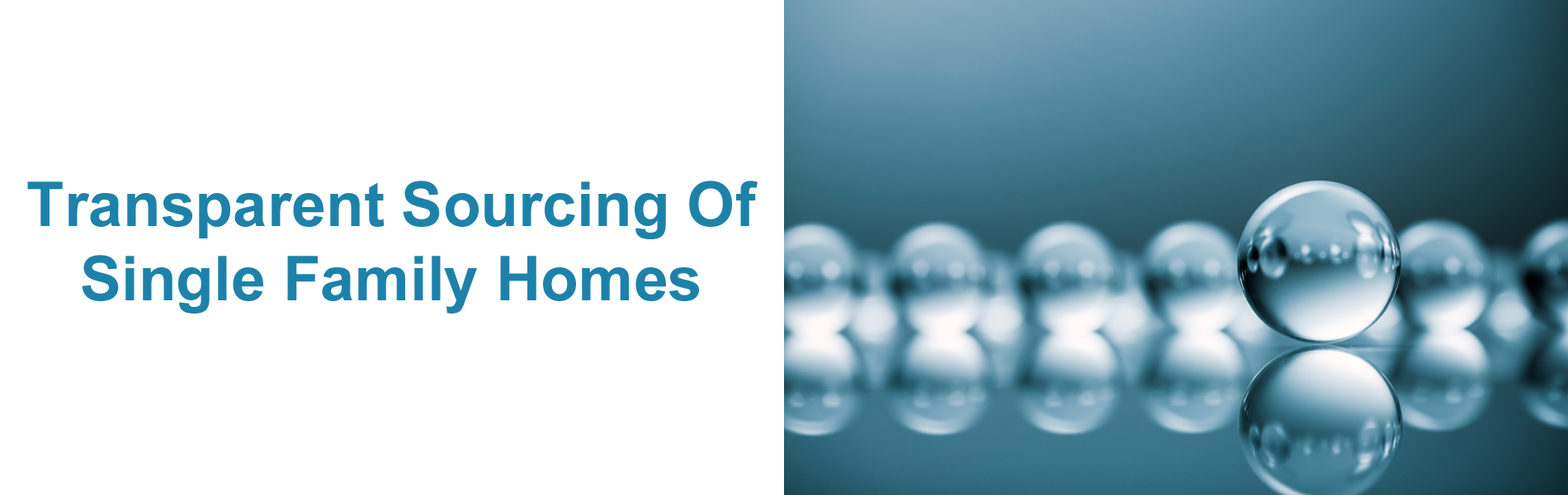
<style>
.page{position:relative;width:1568px;height:495px;background:#ffffff}
.page>*{position:absolute;margin:0}
.t1{font:61.9px "Arial-BoldMT";color:#1d82aa}
</style>
<div class="page">
<p class="t1" style="left:27px;top:181px;width:731px;height:133px;text-align:center">Transparent Sourcing Of<br>Single Family Homes</p>
</div>
